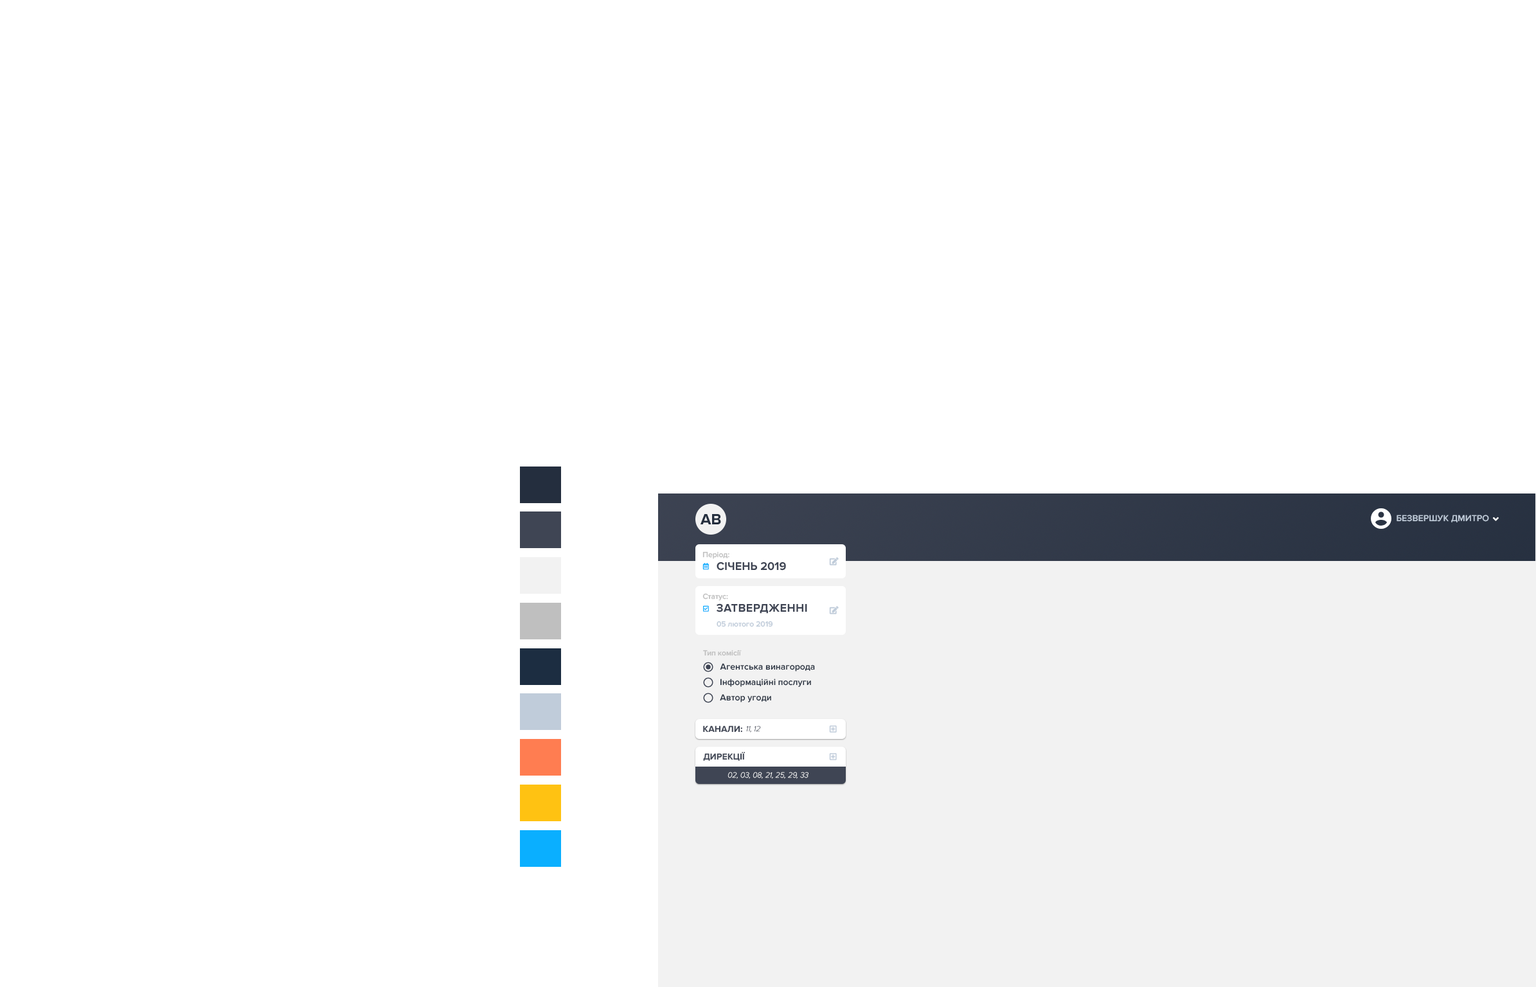
<style>
.page{position:relative;width:1536px;height:987px;background:#ffffff}
.page>*{position:absolute;margin:0}
.t1{font:15.4px "ProximaNova-Bold";color:#242e3e}
.t2{font:9px "ProximaNova-Semibold";color:#c0ccda;text-transform:uppercase}
.t3{font:7.7px "ProximaNova-Semibold";color:#bfbfbf}
.t4{font:11.6px "ProximaNova-Bold";color:#3f4554}
.t5{font:11.6px "ProximaNova-Bold";letter-spacing:0.025em;color:#3f4554;text-transform:uppercase}
.t6{font:7.7px "ProximaNova-Semibold";color:#c0ccda}
.t7{font:9px "ProximaNova-Semibold";color:#242e3e}
.t8{font:9px "ProximaNova-Bold";color:#3f4554}
.t9{font:7.7px "ProximaNova-ThinIt";color:#3f4554}
.t10{font:7.7px "ProximaNova-ThinIt";color:#ffffff}
</style>
<div class="page">
<p class="t1" style="left:701px;top:514px;width:20px;height:11px">АВ</p>
<p class="t2" style="left:1397px;top:515px;width:93px;height:8px">БЕЗВЕРШУК Дмитро</p>
<p class="t3" style="left:703px;top:552px;width:27px;height:7px">Період:</p>
<p class="t4" style="left:717px;top:562px;width:69px;height:9px">СІЧЕНЬ 2019</p>
<p class="t3" style="left:703px;top:593px;width:25px;height:8px">Статус:</p>
<p class="t5" style="left:717px;top:604px;width:90px;height:10px">затвердженні</p>
<p class="t6" style="left:717px;top:621px;width:56px;height:6px">05 лютого 2019</p>
<p class="t3" style="left:703px;top:650px;width:39px;height:6px">Тип комісії</p>
<p class="t7" style="left:720px;top:663px;width:95px;height:9px">Агентська винагорода</p>
<p class="t7" style="left:720px;top:679px;width:91px;height:8px">Інформаційні послуги</p>
<p class="t7" style="left:720px;top:694px;width:51px;height:9px">Автор угоди</p>
<p class="t8" style="left:703px;top:726px;width:39px;height:7px">КАНАЛИ:</p>
<p class="t9" style="left:746px;top:726px;width:15px;height:7px">11, 12</p>
<p class="t8" style="left:703px;top:752px;width:42px;height:9px">ДИРЕКЦІЇ</p>
<p class="t10" style="left:728px;top:772px;width:81px;height:7px">02, 03, 08, 21, 25, 29, 33</p>
</div>
